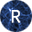
<style>
.page{position:relative;width:32px;height:32px}
.page>*{position:absolute;margin:0}
.t1{font:18.4px "SourceSansPro-Light";letter-spacing:0.2em;color:#ffffff;font-weight:bold}
</style>
<div class="page">
<p class="t1" style="left:11px;top:10px;width:10px;height:13px">R</p>
</div>
